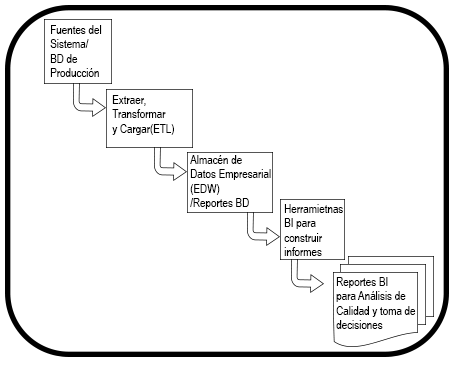
<style>
.page{position:relative;width:455px;height:365px;background:#ffffff}
.page>*{position:absolute;margin:0}
.t1{font:12px "ArialNarrow";color:#000000}
</style>
<div class="page">
<p class="t1" style="left:50px;top:25px;width:52px;height:52px">Fuentes del <br>Sistema/<br>BD de <br>Producción</p>
<p class="t1" style="left:112px;top:95px;width:62px;height:40px">Extraer, <br>Transformar<br>y Cargar(ETL)</p>
<p class="t1" style="left:190px;top:155px;width:81px;height:54px">Almacén de<br>Datos Empresarial<br>(EDW)<br>/Reportes BD</p>
<p class="t1" style="left:284px;top:204px;width:59px;height:52px">Herramietnas <br>BI para <br>construir<br>informes</p>
<p class="t1" style="left:336px;top:277px;width:80px;height:52px">Reportes BI<br>para Análisis de <br>Calidad y toma de <br>decisiones</p>
</div>
